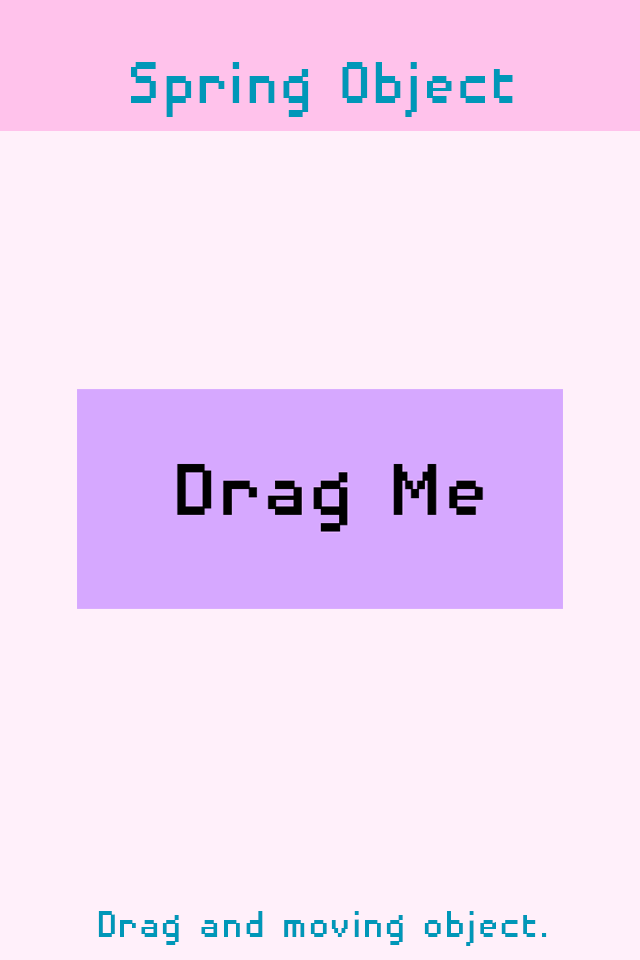
<style>
.page{position:relative;width:640px;height:960px;background:#fff0fa}
.page>*{position:absolute;margin:0}
.t1{font:76.6px "DisposableDroidBB";color:#0097b8;scale:0.91 1}
.t2{font:49.5px "DisposableDroidBB";color:#0097b8;scale:0.91 1}
</style>
<div class="page">
<p class="t1" style="left:131px;top:62px;width:382px;height:55px">Spring Object</p>
<p class="t2" style="left:98px;top:911px;width:449px;height:35px">Drag and moving object.</p>
</div>
